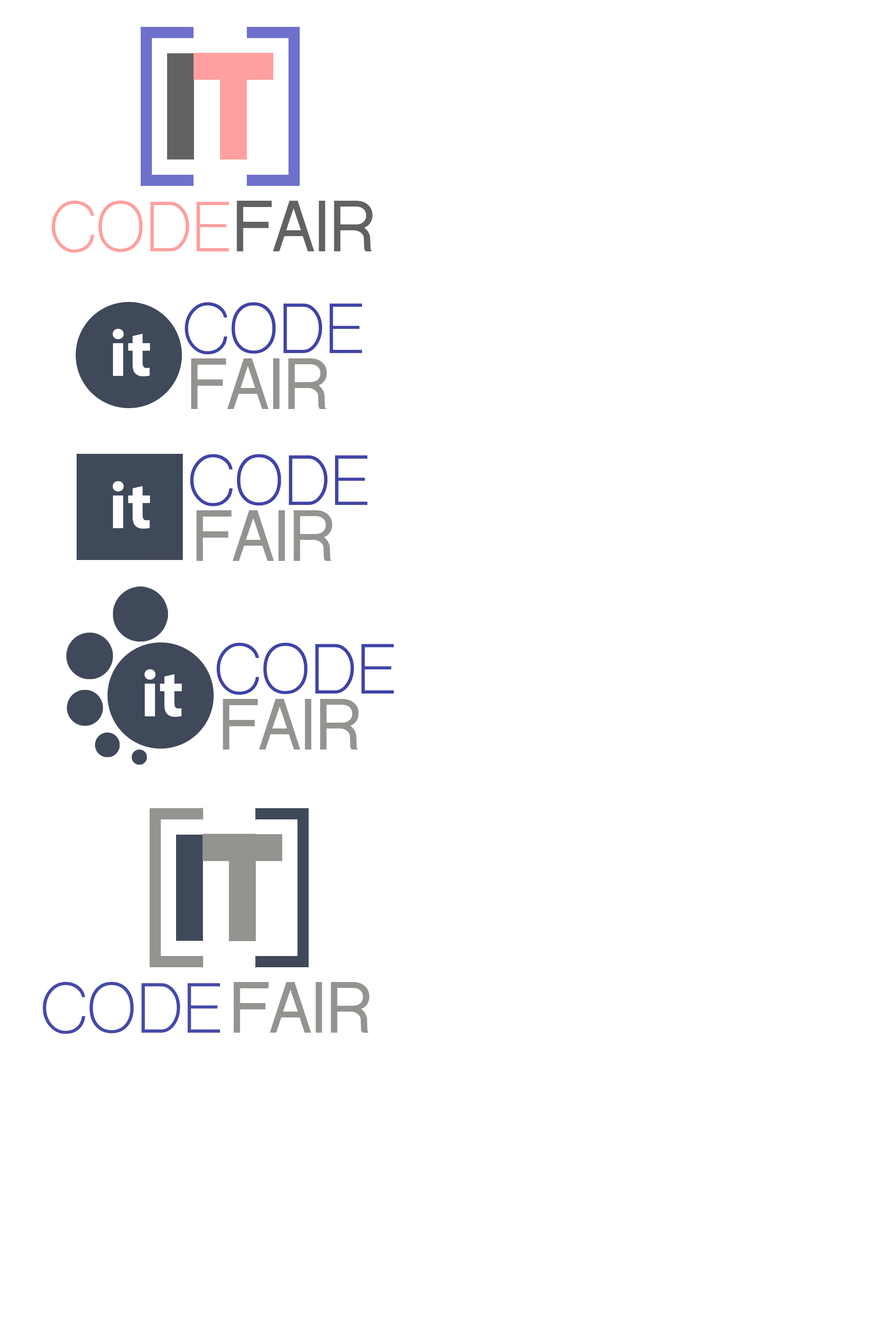
<style>
.page{position:relative;width:887px;height:1344px;background:#ffffff}
.page>*{position:absolute;margin:0}
.t1{font:67.2px "ShreeDev0714";color:#ff9f9f}
.t2{font:67.2px "ShreeDev0714-Bold";color:#626262}
.t3{font:67.2px "ShreeDev0714";color:#4044a7}
.t4{font:67.2px "MyriadPro-Bold";color:#ffffff}
.t5{font:67.2px "ShreeDev0714-Bold";color:#959390}
.t6{font:67.2px "ShreeDev0714";color:#464aa9}
</style>
<div class="page">
<p class="t1" style="left:52px;top:200px;width:177px;height:53px">CODE</p>
<p class="t2" style="left:237px;top:201px;width:136px;height:50px">FAIR</p>
<p class="t3" style="left:185px;top:302px;width:177px;height:52px">CODE</p>
<p class="t4" style="left:112px;top:329px;width:38px;height:47px">it</p>
<p class="t5" style="left:191px;top:358px;width:136px;height:51px">FAIR</p>
<p class="t4" style="left:112px;top:481px;width:38px;height:48px">it</p>
<p class="t3" style="left:216px;top:642px;width:178px;height:53px">CODE</p>
<p class="t4" style="left:144px;top:669px;width:38px;height:48px">it</p>
<p class="t5" style="left:223px;top:699px;width:136px;height:51px">FAIR</p>
<p class="t6" style="left:43px;top:982px;width:177px;height:52px">CODE</p>
<p class="t5" style="left:233px;top:982px;width:137px;height:51px">FAIR</p>
</div>
